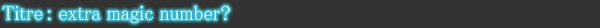
<style>
.page{position:relative;width:600px;height:28px;background:#333333}
.page>*{position:absolute;margin:0}
.t1{font:20px "MS-PMincho";color:#ffffff}
</style>
<div class="page">
<p class="t1" style="left:2px;top:5px;width:228px;height:18px">Titre : extra magic number?</p>
</div>
